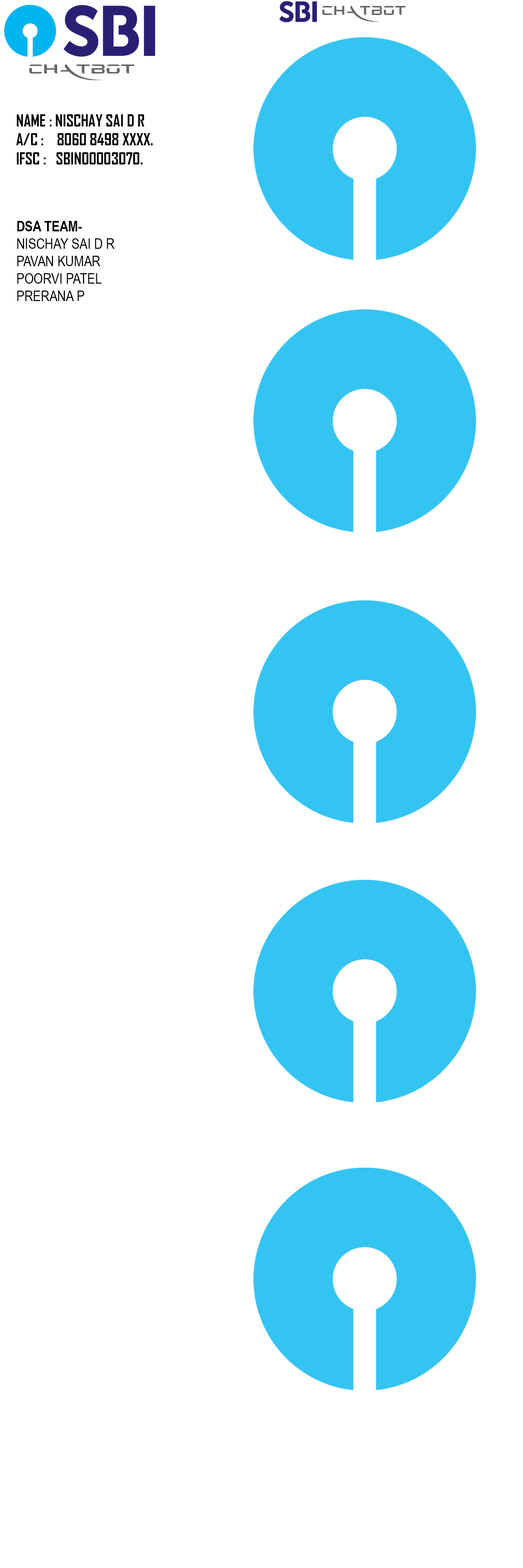
<style>
.page{position:relative;width:523px;height:1568px;background:#ffffff}
.page>*{position:absolute;margin:0}
.t1{font:13.5px "SpaceX";color:#686868;scale:0.81 1}
.t2{font:13.8px "SpaceX";color:#686868}
.t3{font:15.9px "AgencyFB-Bold";color:#000000}
.t4{font:14.5px "ArialNarrow";color:#000000}
.t5{font:14.5px "ArialNarrow-Bold";color:#000000}
</style>
<div class="page">
<p class="t1" style="left:322px;top:5px;width:83px;height:17px">CHATBOT</p>
<p class="t2" style="left:29px;top:64px;width:105px;height:16px">CHATBOT</p>
<p class="t3" style="left:16px;top:114px;width:137px;height:50px">NAME : NISCHAY SAI D R<br>A/C :    8060 8498 XXXX.<br>IFSC :   SBIN00003070.</p>
<p class="t4" style="left:17px;top:221px;width:98px;height:80px"><span class="t5">DSA TEAM-<br></span>NISCHAY SAI D R<br>PAVAN KUMAR<br>POORVI PATEL<br>PRERANA P</p>
</div>
